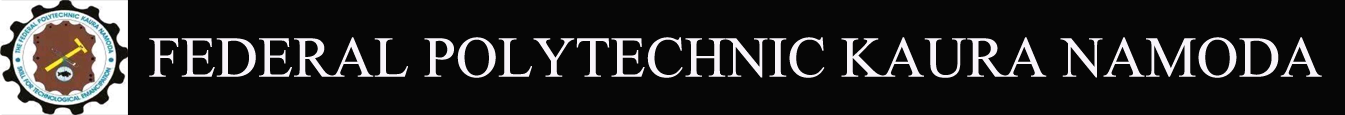
<style>
.page{position:relative;width:1345px;height:115px;background:#060606}
.page>*{position:absolute;margin:0}
.t1{font:72px "Aparajita";color:#f8f4fa}
</style>
<div class="page">
<p class="t1" style="left:149px;top:37px;width:1173px;height:41px">FEDERAL POLYTECHNIC KAURA NAMODA</p>
</div>
